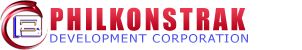
<style>
.page{position:relative;width:302px;height:50px;background:#ffffff}
.page>*{position:absolute;margin:0}
.t1{font:28px "Impact";letter-spacing:0.1em;color:#d42139}
.t2{font:11.6px "Tahoma";letter-spacing:0.075em;color:#4951ea;scale:1.12 1}
</style>
<div class="page">
<p class="t1" style="left:50px;top:7px;width:196px;height:24px">PHILKONSTRAK</p>
<p class="t2" style="left:50px;top:34px;width:198px;height:9px">DEVELOPMENT CORPORATION</p>
</div>
